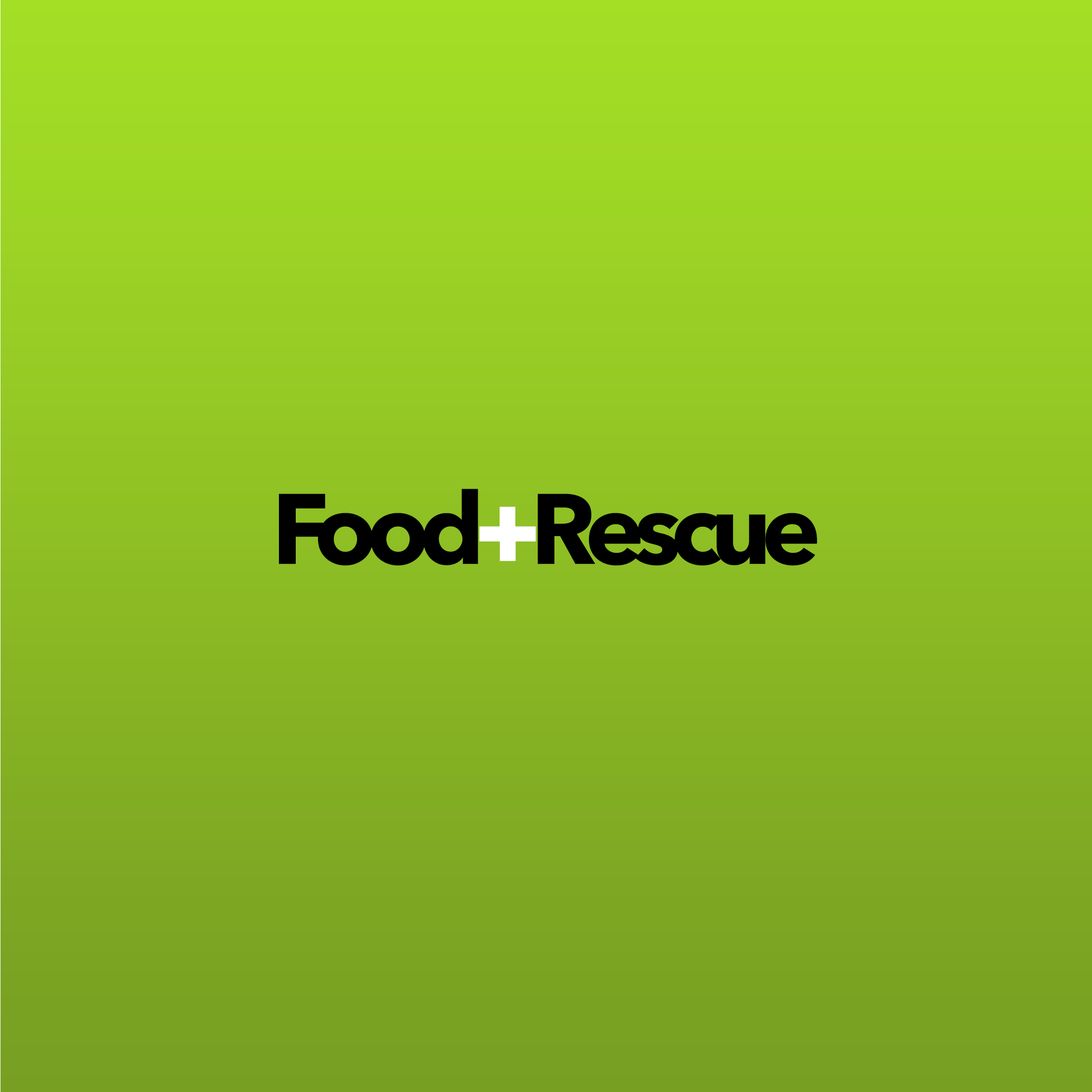
<style>
.page{position:relative;width:1092px;height:1092px}
.page>*{position:absolute;margin:0}
.t1{font:98.9px "AvenirNext-Bold";letter-spacing:-0.1em;color:#000000}
.t2{font:98.9px "AvenirNext-Heavy";letter-spacing:-0.1em;color:#ffffff}
</style>
<div class="page">
<p class="t1" style="left:279px;top:489px;width:538px;height:77px">Food<span class="t2">+</span>Rescue</p>
</div>
